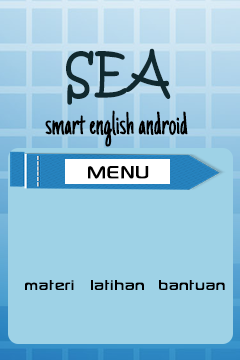
<style>
.page{position:relative;width:240px;height:360px;background:#9ed2e6}
.page>*{position:absolute;margin:0}
.t1{font:54px "KristenITC-Regular";color:#10292f;scale:0.89 1}
.t2{font:34px "JustAnotherHand-Regular";color:#000000;scale:0.89 1}
.t3{font:25px "SonySketchEF";color:#000000}
.t4{font:20px "SonySketchEF";color:#000000}
</style>
<div class="page">
<p class="t1" style="left:66px;top:48px;width:105px;height:57px">SEA</p>
<p class="t2" style="left:45px;top:110px;width:143px;height:37px">smart english android</p>
<p class="t3" style="left:88px;top:166px;width:61px;height:13px">MENU</p>
<p class="t4" style="left:25px;top:280px;width:49px;height:10px">materi</p>
<p class="t4" style="left:91px;top:280px;width:53px;height:10px">latihan</p>
<p class="t4" style="left:159px;top:280px;width:66px;height:10px">bantuan</p>
</div>
